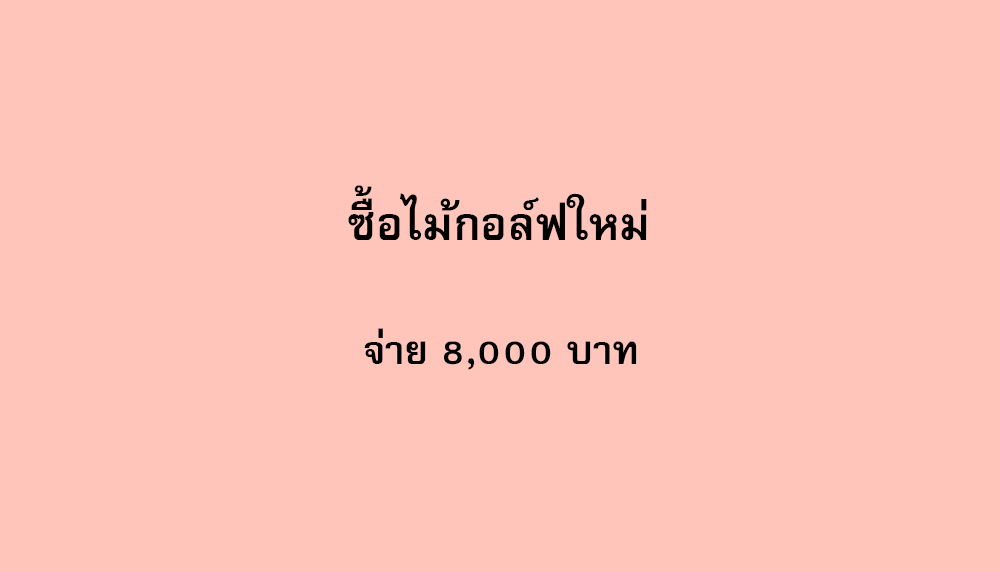
<style>
.page{position:relative;width:1000px;height:572px;background:#ffc4ba}
.page>*{position:absolute;margin:0}
.t1{font:64px "FreesiaUPCBold";color:#000000}
.t2{font:56px "FreesiaUPCBold";color:#000000}
</style>
<div class="page">
<p class="t1" style="left:348px;top:185px;width:299px;height:55px">ซื้อไม้กอล์ฟใหม่</p>
<p class="t2" style="left:364px;top:328px;width:273px;height:42px">จ่าย 8,000 บาท</p>
</div>
